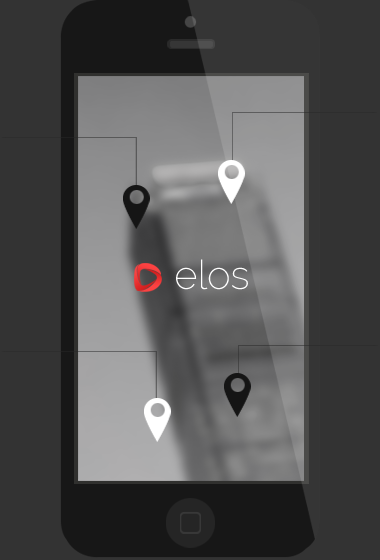
<style>
.page{position:relative;width:380px;height:560px;background:#333333}
.page>*{position:absolute;margin:0}
.t1{font:40px "Raleway-ExtraLight";color:#ffffff}
</style>
<div class="page">
<p class="t1" style="left:176px;top:259px;width:72px;height:31px">elos</p>
</div>
